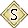
<style>
.page{position:relative;width:28px;height:28px;background:#ffffff}
.page>*{position:absolute;margin:0}
.t1{font:15.2px "LaoUI";color:#000000}
</style>
<div class="page">
<p class="t1" style="left:11px;top:9px;width:6px;height:11px">S</p>
</div>
